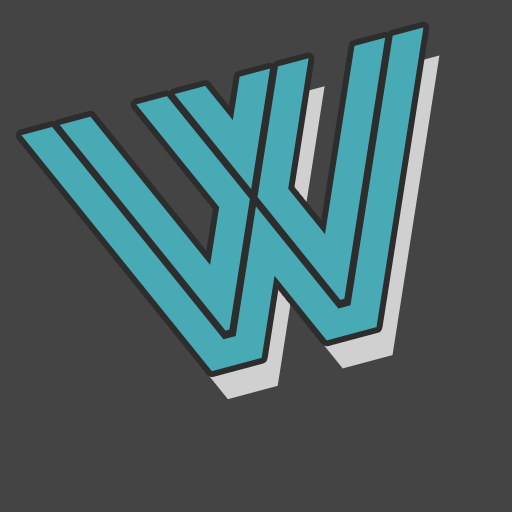
<style>
.page{position:relative;width:512px;height:512px;background:#444444}
.page>*{position:absolute;margin:0}
.t1{font:396px "ViperSquadron";color:#48aab5}
</style>
<div class="page">
<p class="t1" style="left:21px;top:27px;width:403px;height:345px;rotate:-15deg">W</p>
</div>
